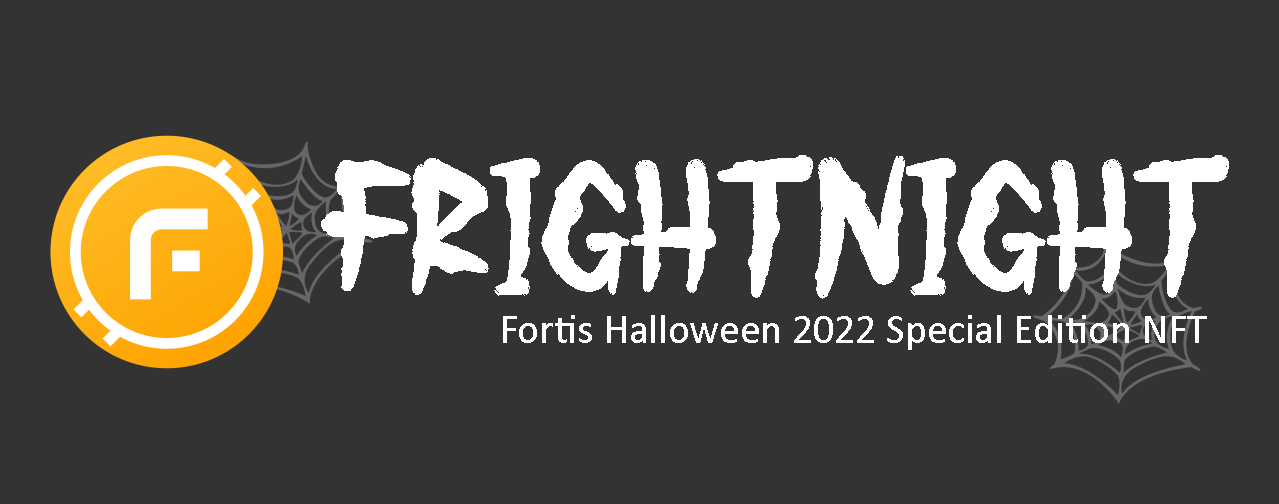
<style>
.page{position:relative;width:1279px;height:504px;background:#333333}
.page>*{position:absolute;margin:0}
.t1{font:187.5px "LOSMENTHUNTER";color:#ffffff}
.t2{font:41.7px "Calibri";color:#ffffff}
</style>
<div class="page">
<p class="t1" style="left:321px;top:155px;width:908px;height:144px">FrightNight</p>
<p class="t2" style="left:503px;top:315px;width:704px;height:35px">Fortis Halloween 2022 Special Edition NFT</p>
</div>
